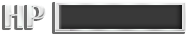
<style>
.page{position:relative;width:189px;height:36px;background:#393939}
.page>*{position:absolute;margin:0}
.t1{font:8.3px "BritannicBold";color:#e9eae9}
</style>
<div class="page">
<p class="t1" style="left:5px;top:5px;width:41px;height:23px">HP</p>
</div>
